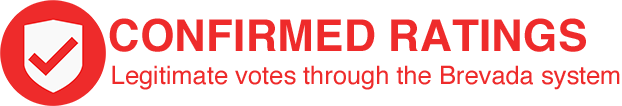
<style>
.page{position:relative;width:622px;height:106px;background:#ffffff}
.page>*{position:absolute;margin:0}
.t1{font:44px "Helvetica-Bold";color:#ee2b2b}
.t2{font:25.4px "Helvetica";color:#ee2b2b}
</style>
<div class="page">
<p class="t1" style="left:109px;top:18px;width:477px;height:34px">CONFIRMED RATINGS</p>
<p class="t2" style="left:112px;top:65px;width:508px;height:25px">Legitimate votes through the Brevada system</p>
</div>
